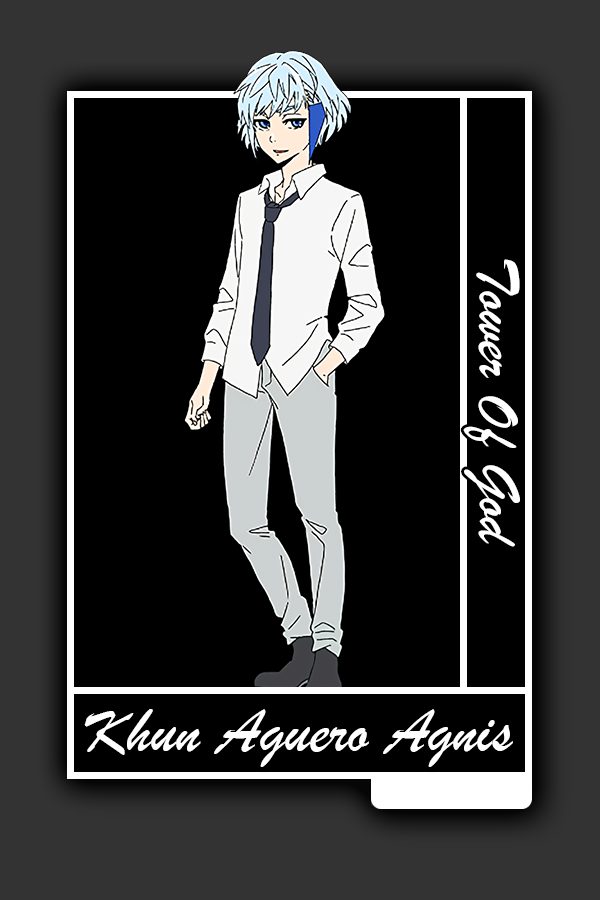
<style>
.page{position:relative;width:600px;height:900px;background:#000000}
.page>*{position:absolute;margin:0}
.t1{font:61.5px "BrushScriptMT";color:#ffffff}
.t2{font:65.2px "BrushScriptMT";color:#ffffff}
</style>
<div class="page">
<p class="t1" style="left:463px;top:259px;width:57px;height:288px;rotate:90deg">Tower Of God</p>
<p class="t2" style="left:84px;top:709px;width:429px;height:58px">Khun Aguero Agnis</p>
</div>
